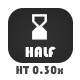
<style>
.page{position:relative;width:80px;height:80px;background:#ffffff}
.page>*{position:absolute;margin:0}
.t1{font:15px "Bauhaus93";color:#ffffff}
.t2{font:12px "Bauhaus93";color:#464646}
</style>
<div class="page">
<p class="t1" style="left:25px;top:46px;width:31px;height:11px">HALF</p>
<p class="t2" style="left:16px;top:65px;width:47px;height:10px">HT 0.30x</p>
</div>
